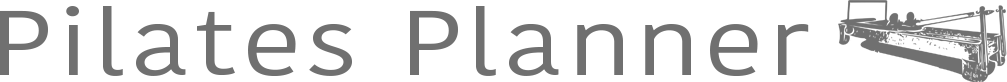
<style>
.page{position:relative;width:1007px;height:82px;background:#ffffff}
.page>*{position:absolute;margin:0}
.t1{font:91px "KohinoorBangla-Regular";letter-spacing:0.04em;color:#707070;scale:1.22 1}
</style>
<div class="page">
<p class="t1" style="left:0px;top:6px;width:809px;height:70px">Pilates Planner</p>
</div>
